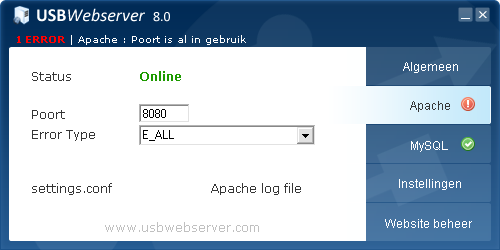
<style>
.page{position:relative;width:500px;height:250px;background:#ffffff}
.page>*{position:absolute;margin:0}
.t1{font:18px "Calibri-Italic";color:#ffffff}
.t2{font:18px "Calibri-Bold";color:#ffffff}
.t3{font:14px "Calibri";color:#ffffff}
.t4{font:10.5px "Calibri";color:#ffffff;scale:1.67 1}
.t5{font:10px "Verdana";color:#ffffff}
.t6{font:10px "Verdana-Bold";color:#ff0000}
.t7{font:12px "ArialMT";color:#ffffff}
.t8{font:12px/18px "Verdana";color:#353535}
.t9{font:12px/18px "Verdana-Bold";color:#1d9a00}
.t10{font:12px/20px "Verdana";color:#353535}
.t11{font:12px "ArialMT";color:#363636}
.t12{font:12px "Verdana";color:#c0c0c0}
</style>
<div class="page">
<p class="t1" style="left:37px;top:8px;width:133px;height:14px"><span class="t2">USB</span>Webserver  <span class="t3">8.0</span></p>
<p class="t4" style="left:478px;top:11px;width:9px;height:7px">X</p>
<p class="t5" style="left:17px;top:35px;width:229px;height:10px"><span class="t6">1 ERROR</span> | Apache : Poort is al in gebruik</p>
<p class="t7" style="left:403px;top:62px;width:55px;height:11px">Algemeen</p>
<p class="t8" style="left:32px;top:71px;width:269px;height:124px">Status  <span class="t9">Online   <br><br></span><span class="t10">Poort   8080<br>Error Type</span>  E_ALL<br><br><br>settings.conf   Apache log file</p>
<p class="t11" style="left:410px;top:101px;width:40px;height:11px">Apache</p>
<p class="t7" style="left:411px;top:141px;width:37px;height:11px">MySQL</p>
<p class="t7" style="left:399px;top:179px;width:62px;height:11px">Instellingen</p>
<p class="t12" style="left:105px;top:222px;width:154px;height:10px">www.usbwebserver.com</p>
<p class="t7" style="left:385px;top:219px;width:87px;height:9px">Website beheer</p>
</div>
